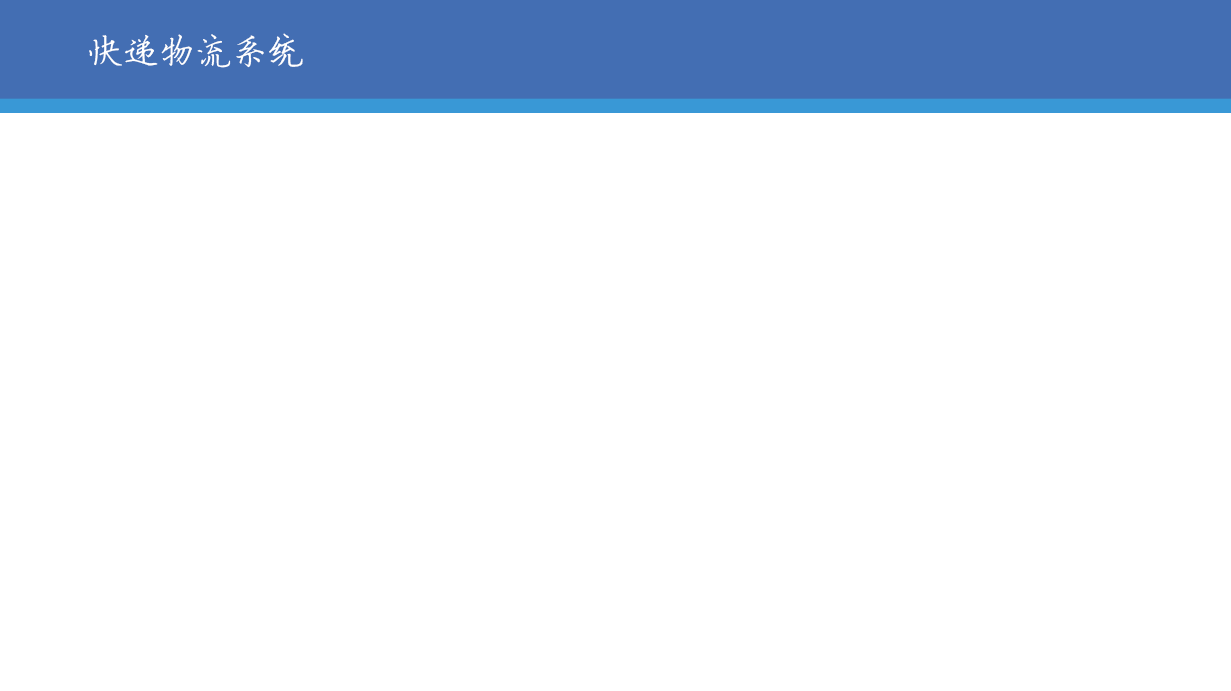
<style>
.page{position:relative;width:1231px;height:691px;background:#ffffff}
.page>*{position:absolute;margin:0}
.t1{font:36px "FZYBKSJW--GB1-0";color:#ffffff}
</style>
<div class="page">
<p class="t1" style="left:89px;top:33px;width:214px;height:35px">快递物流系统</p>
</div>
